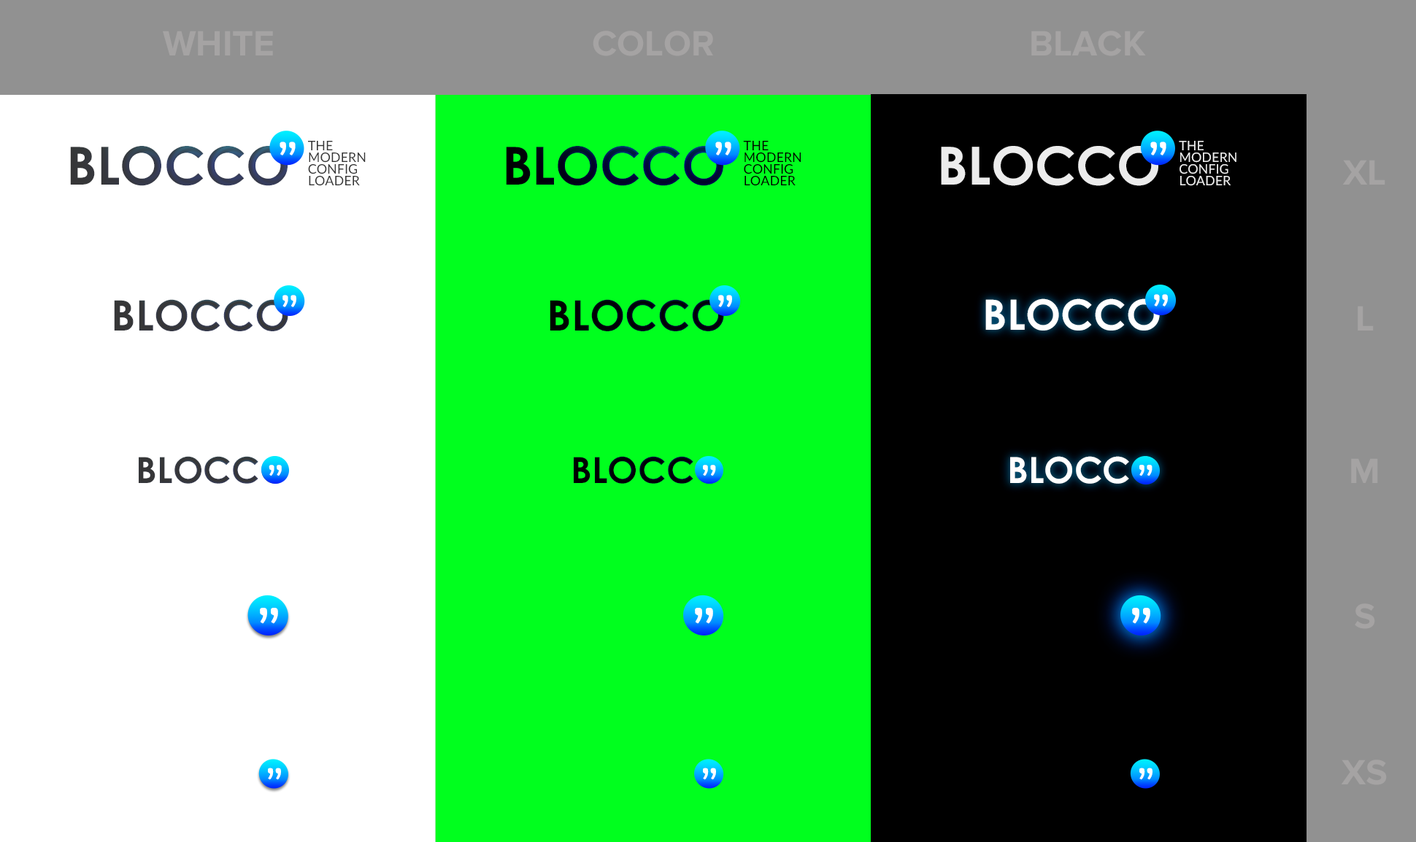
<style>
.page{position:relative;width:1416px;height:842px;background:#ffffff}
.page>*{position:absolute;margin:0}
.t1{font:36.3px "ProximaNova-Bold";color:#a5a3a3;text-transform:uppercase}
.t2{font:52.5px "CenturyGothic-Bold";text-transform:uppercase}
.t3{font:58.9px "UniCreditCY";color:#ffffff;text-transform:uppercase}
.t4{font:13.1px/11.7px "Lato-Regular";color:#363636;text-transform:uppercase}
.t5{font:13.1px/11.7px "Lato-Regular";color:#000000;text-transform:uppercase}
.t6{font:52.5px "CenturyGothic-Bold";color:#ececec;text-transform:uppercase}
.t7{font:13.1px/11.7px "Lato-Regular";color:#ececec;text-transform:uppercase}
.t8{font:42px "CenturyGothic-Bold";color:#363636;text-transform:uppercase}
.t9{font:52.5px "UniCreditCY";color:#ffffff;text-transform:uppercase}
.t10{font:42px "CenturyGothic-Bold";color:#000000;text-transform:uppercase}
.t11{font:42px "CenturyGothic-Bold";color:#ffffff;text-transform:uppercase}
.t12{font:36.1px "CenturyGothic-Bold";color:#363636;text-transform:uppercase}
.t13{font:36.1px "CenturyGothic-Bold";color:#000000;text-transform:uppercase}
.t14{font:36.1px "CenturyGothic-Bold";color:#ffffff;text-transform:uppercase}
.t15{font:47.6px "UniCreditCY";color:#ffffff;text-transform:uppercase}
.t16{font:47.5px "UniCreditCY";color:#ffffff;text-transform:uppercase}
.t17{font:48.8px "UniCreditCY";color:#ffffff;text-transform:uppercase}
.t18{font:69px "UniCreditCY";color:#ffffff;text-transform:uppercase}
.t19{font:50.1px "UniCreditCY";color:#ffffff;text-transform:uppercase}
</style>
<div class="page">
<p class="t1" style="left:163px;top:31px;width:110px;height:24px">White</p>
<p class="t1" style="left:593px;top:31px;width:120px;height:25px">Color</p>
<p class="t1" style="left:1031px;top:31px;width:115px;height:25px">Black</p>
<p class="t2" style="left:70px;top:146px;width:218px;height:40px">Blocco</p>
<p class="t3" style="left:280px;top:142px;width:16px;height:13px">”</p>
<p class="t4" style="left:308px;top:141px;width:58px;height:45px">the<br>modern<br>config<br>loader</p>
<p class="t2" style="left:506px;top:146px;width:217px;height:40px">Blocco</p>
<p class="t3" style="left:715px;top:142px;width:16px;height:13px">”</p>
<p class="t5" style="left:743px;top:141px;width:58px;height:45px">the<br>modern<br>config<br>loader</p>
<p class="t6" style="left:941px;top:146px;width:217px;height:40px">Blocco</p>
<p class="t3" style="left:1150px;top:142px;width:16px;height:13px">”</p>
<p class="t7" style="left:1179px;top:141px;width:57px;height:45px">the<br>modern<br>config<br>loader</p>
<p class="t1" style="left:1342px;top:160px;width:43px;height:25px">XL</p>
<p class="t8" style="left:114px;top:299px;width:174px;height:32px">Blocco</p>
<p class="t9" style="left:282px;top:295px;width:14px;height:12px">”</p>
<p class="t10" style="left:550px;top:299px;width:174px;height:32px">Blocco</p>
<p class="t9" style="left:718px;top:295px;width:14px;height:12px">”</p>
<p class="t11" style="left:985px;top:298px;width:175px;height:33px">Blocco</p>
<p class="t9" style="left:1154px;top:294px;width:14px;height:13px">”</p>
<p class="t1" style="left:1357px;top:306px;width:17px;height:25px">L</p>
<p class="t12" style="left:139px;top:456px;width:149px;height:28px">Blocco</p>
<p class="t13" style="left:574px;top:456px;width:149px;height:28px">Blocco</p>
<p class="t14" style="left:1010px;top:456px;width:149px;height:28px">Blocco</p>
<p class="t1" style="left:1351px;top:458px;width:27px;height:25px">M</p>
<p class="t15" style="left:269px;top:465px;width:13px;height:11px">”</p>
<p class="t16" style="left:703px;top:465px;width:13px;height:11px">”</p>
<p class="t17" style="left:1139px;top:465px;width:13px;height:11px">”</p>
<p class="t1" style="left:1355px;top:604px;width:20px;height:25px">S</p>
<p class="t18" style="left:260px;top:608px;width:18px;height:16px">”</p>
<p class="t18" style="left:695px;top:608px;width:18px;height:16px">”</p>
<p class="t18" style="left:1132px;top:608px;width:18px;height:16px">”</p>
<p class="t1" style="left:1341px;top:760px;width:46px;height:25px">XS</p>
<p class="t19" style="left:268px;top:768px;width:13px;height:12px">”</p>
<p class="t19" style="left:703px;top:768px;width:13px;height:12px">”</p>
<p class="t19" style="left:1139px;top:768px;width:13px;height:12px">”</p>
</div>
